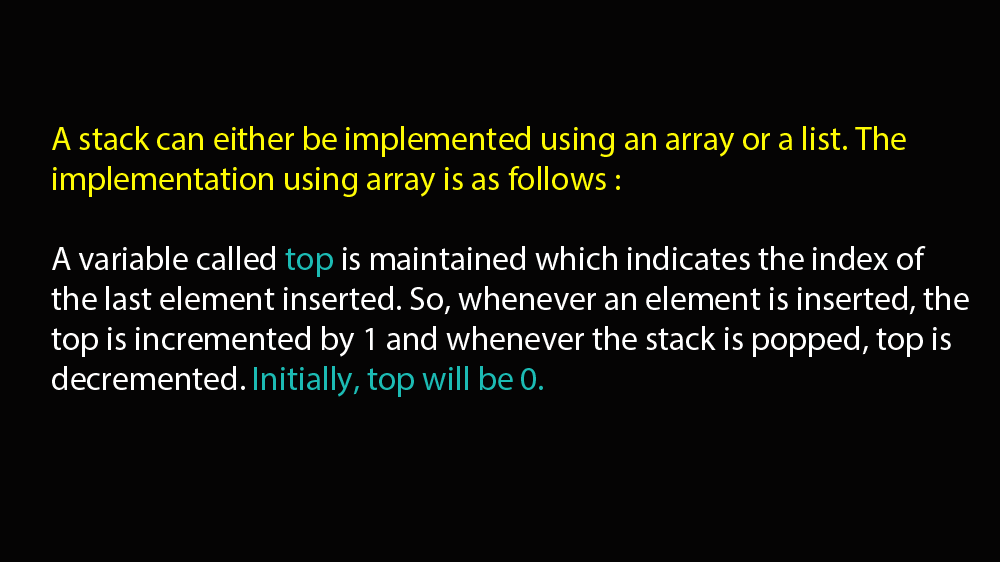
<style>
.page{position:relative;width:1000px;height:562px;background:#050404}
.page>*{position:absolute;margin:0}
.t1{font:33.3px "MyriadPro-Regular";color:#ffffff}
.t2{font:33.3px "MyriadPro-Regular";color:#fefb04}
.t3{font:33.3px "MyriadPro-Regular";color:#1cbbb4}
</style>
<div class="page">
<p class="t1" style="left:51px;top:126px;width:918px;height:271px"><span class="t2">A stack can either be implemented using an array or a list. The implementation using array is as follows :<br><br></span>A variable called <span class="t3">top</span> is maintained which indicates the index of the last element inserted. So, whenever an element is inserted, the top is incremented by 1 and whenever the stack is popped, top is decremented. <span class="t3">Initially, top will be 0.</span></p>
</div>
